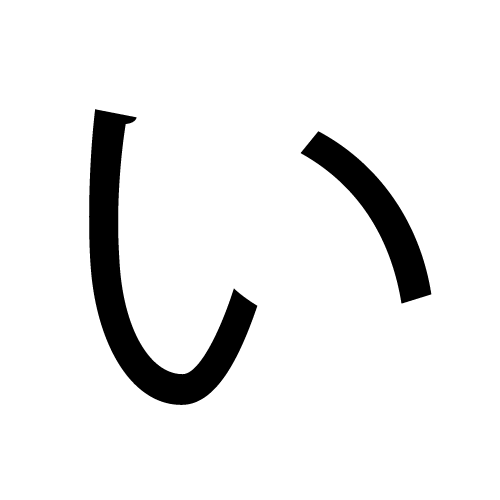
<style>
.page{position:relative;width:500px;height:500px;background:#ffffff}
.page>*{position:absolute;margin:0}
.t1{font:400px "KozGoPr6N-Regular";color:#000000}
</style>
<div class="page">
<p class="t1" style="left:89px;top:109px;width:343px;height:296px">い</p>
</div>
